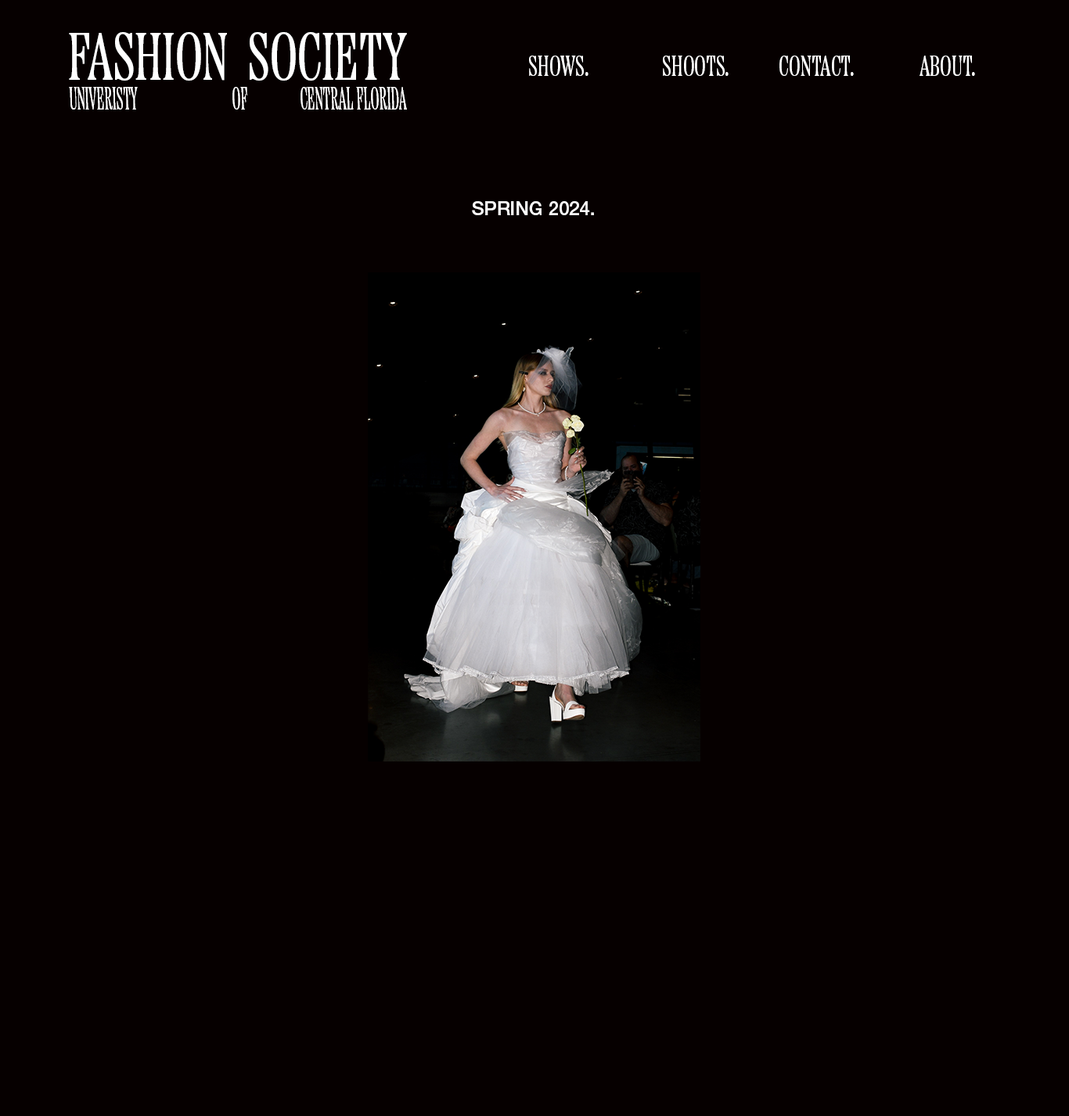
<style>
.page{position:relative;width:1069px;height:1116px;background:#060000}
.page>*{position:absolute;margin:0}
.t1{font:67.4px "EtnaXCondensed-Regular";color:#ffffff}
.t2{font:28.2px "EtnaXCondensed-Regular";color:#ffffff}
.t3{font:31.8px "EtnaXCondensed-Regular";color:#ffffff;scale:0.66 1}
.t4{font:18.8px "HelveticaNeueLTPro-Md";color:#ffffff}
</style>
<div class="page">
<p class="t1" style="left:69px;top:32px;width:338px;height:49px">FASHION  SOCIETY</p>
<p class="t2" style="left:529px;top:56px;width:59px;height:20px">SHOWS.</p>
<p class="t2" style="left:663px;top:56px;width:65px;height:20px">SHOOTS.</p>
<p class="t2" style="left:779px;top:56px;width:75px;height:20px">CONTACT.</p>
<p class="t2" style="left:919px;top:56px;width:56px;height:20px">ABOUT.</p>
<p class="t3" style="left:69px;top:87px;width:69px;height:23px">UNIVERISTY</p>
<p class="t3" style="left:232px;top:87px;width:15px;height:23px">OF</p>
<p class="t3" style="left:300px;top:87px;width:107px;height:23px">CENTRAL FLORIDA</p>
<p class="t4" style="left:472px;top:201px;width:122px;height:14px">SPRING 2024.</p>
</div>
